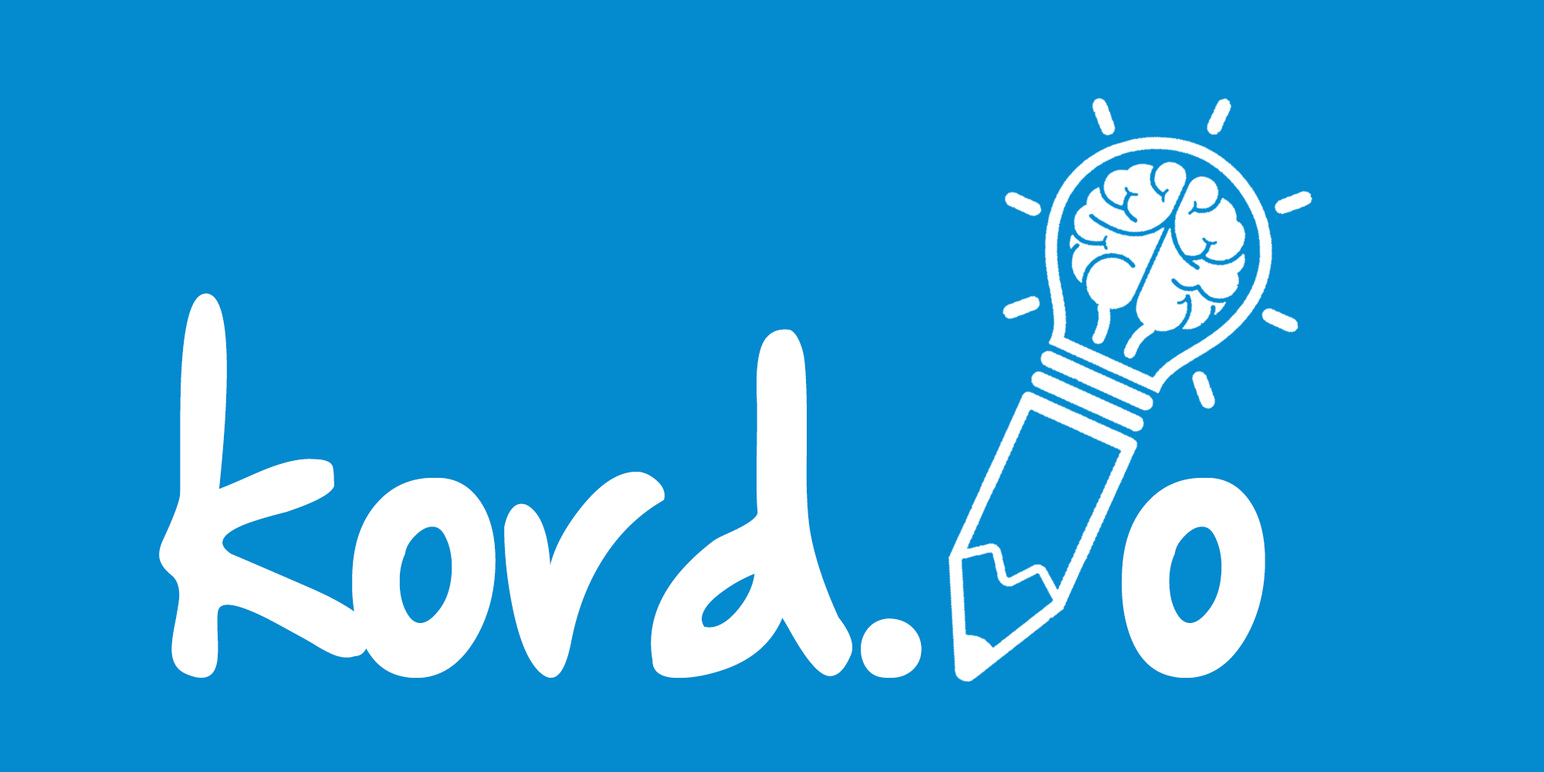
<style>
.page{position:relative;width:1544px;height:772px;background:#038acf}
.page>*{position:absolute;margin:0}
.t1{font:384.5px "HandOfSeanDemo";letter-spacing:-0.05em;color:#ffffff;scale:0.89 1}
</style>
<div class="page">
<p class="t1" style="left:159px;top:293px;width:1107px;height:385px">kord.  o</p>
</div>
